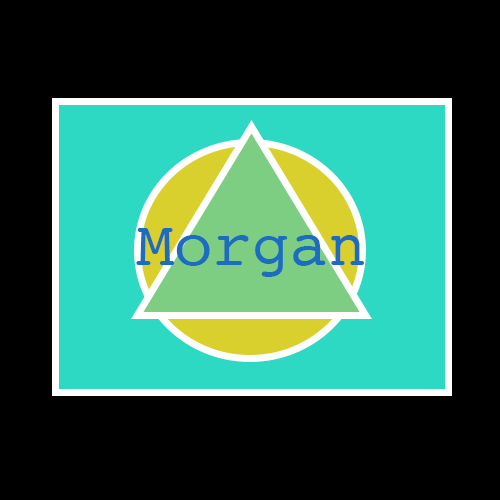
<style>
.page{position:relative;width:500px;height:500px;background:#000000}
.page>*{position:absolute;margin:0}
.t1{font:64px "Courier";color:#1c6cbf}
</style>
<div class="page">
<p class="t1" style="left:136px;top:228px;width:228px;height:49px">Morgan</p>
</div>
